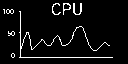
<style>
.page{position:relative;width:128px;height:64px;background:#000000}
.page>*{position:absolute;margin:0}
.t1{font:16px "GothicA1-Regular";color:#ffffff}
.t2{font:7px "GothicA1-Regular";color:#ffffff}
</style>
<div class="page">
<p class="t1" style="left:51px;top:3px;width:31px;height:13px">CPU</p>
<p class="t2" style="left:2px;top:8px;width:12px;height:7px">100</p>
<p class="t2" style="left:7px;top:30px;width:8px;height:7px">50</p>
<p class="t2" style="left:11px;top:52px;width:4px;height:7px">0</p>
</div>
